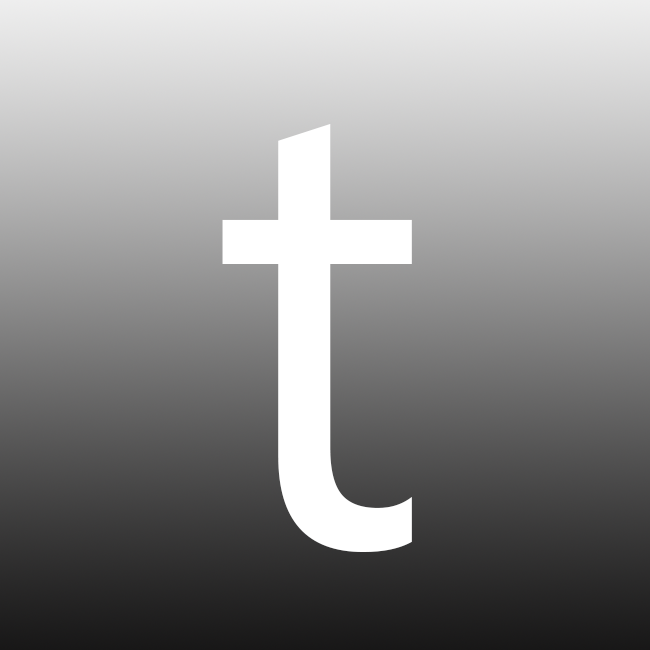
<style>
.page{position:relative;width:650px;height:650px}
.page>*{position:absolute;margin:0}
.t1{font:648px "SegoeUI";color:#ffffff}
</style>
<div class="page">
<p class="t1" style="left:222px;top:123px;width:190px;height:429px">t</p>
</div>
